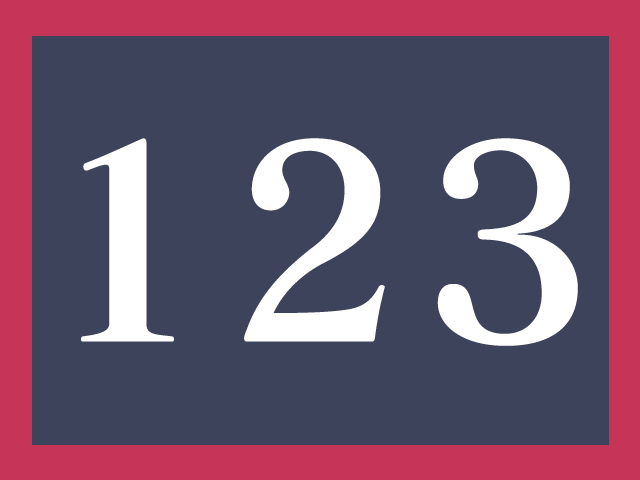
<style>
.page{position:relative;width:640px;height:480px;background:#3e435c}
.page>*{position:absolute;margin:0}
.t1{font:267.1px "MatisseMinoriPro-B";color:#ffffff}
</style>
<div class="page">
<p class="t1" style="left:81px;top:138px;width:93px;height:204px">1</p>
<p class="t1" style="left:244px;top:138px;width:141px;height:204px">2</p>
<p class="t1" style="left:437px;top:138px;width:141px;height:208px">3</p>
</div>
